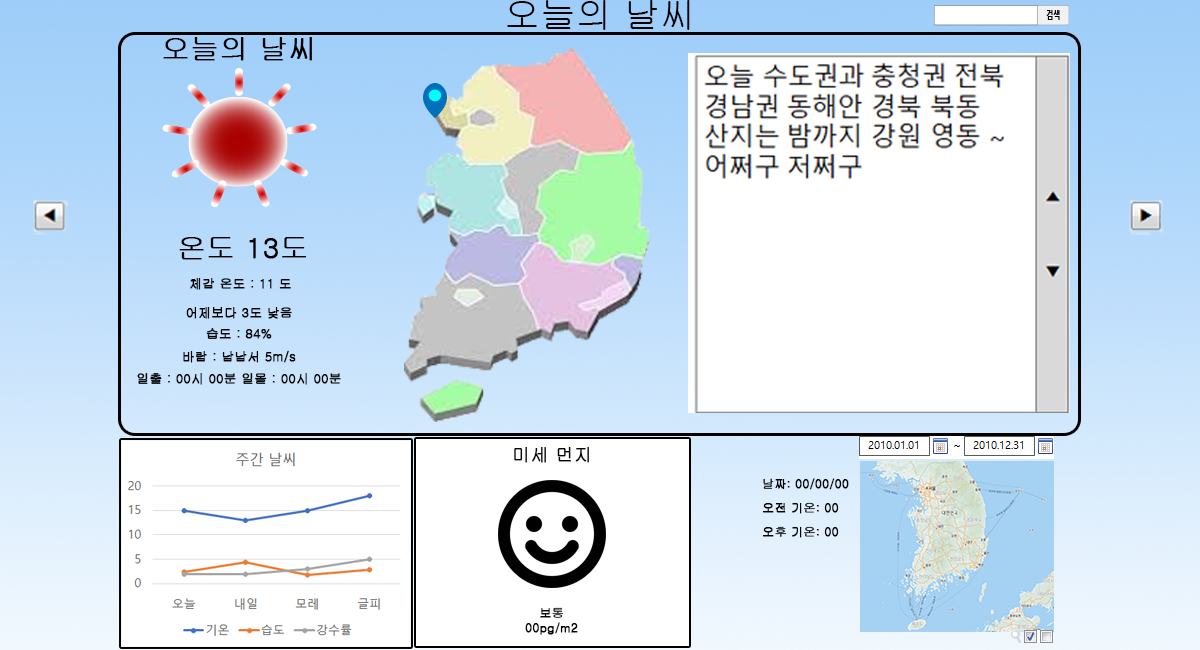
<style>
.page{position:relative;width:1200px;height:650px;background:#ffffff}
.page>*{position:absolute;margin:0}
.t1{font:36.3px "Gulim";color:#000000}
.t2{font:28.4px "Gulim";color:#000000;font-weight:bold}
.t3{font:12.6px "Gulim";color:#000000;font-weight:bold}
.t4{font:18px "Gulim";color:#050505;font-weight:bold}
.t5{font:12px "Gulim";color:#000000;font-weight:bold}
.t6{font:12px "Gulim";color:#050505;font-weight:bold}
</style>
<div class="page">
<p class="t1" style="left:507px;top:0px;width:183px;height:30px">오늘의 날씨</p>
<p class="t2" style="left:163px;top:37px;width:149px;height:24px">오늘의 날씨</p>
<p class="t2" style="left:179px;top:237px;width:128px;height:23px">온도 13도</p>
<p class="t3" style="left:190px;top:278px;width:101px;height:12px">체감 온도 : 11 도</p>
<p class="t3" style="left:186px;top:307px;width:106px;height:12px">어제보다 3도 낮음</p>
<p class="t3" style="left:206px;top:328px;width:66px;height:11px">습도 : 84%</p>
<p class="t3" style="left:183px;top:350px;width:113px;height:13px">바람 : 남남서 5m/s</p>
<p class="t3" style="left:137px;top:373px;width:204px;height:12px">일출 : 00시 00분 일몰 : 00시 00분</p>
<p class="t4" style="left:514px;top:447px;width:75px;height:16px">미세 먼지</p>
<p class="t5" style="left:763px;top:478px;width:86px;height:12px">날짜: 00/00/00</p>
<p class="t5" style="left:763px;top:502px;width:76px;height:12px">오전 기온: 00</p>
<p class="t5" style="left:763px;top:526px;width:76px;height:12px">오후 기온: 00</p>
<p class="t6" style="left:525px;top:607px;width:53px;height:28px;text-align:center">보통<br>00pg/m2</p>
</div>
